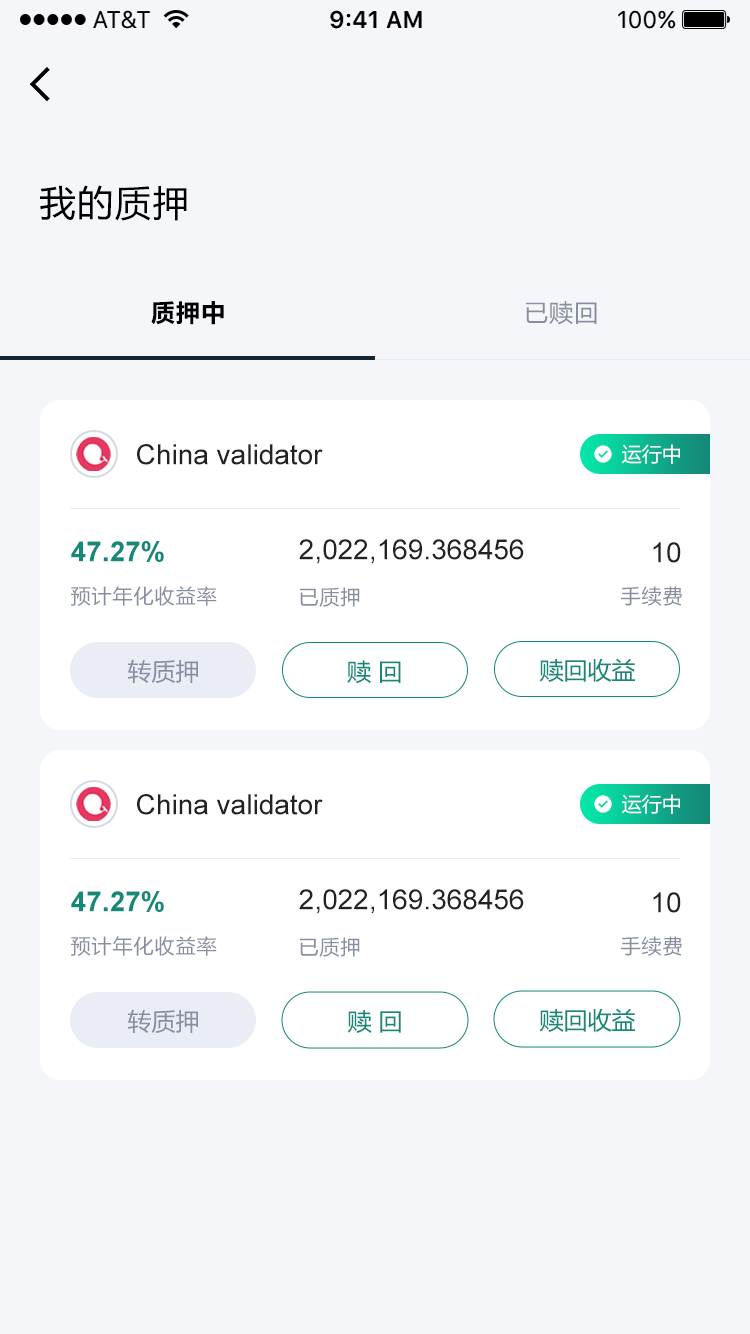
<style>
.page{position:relative;width:750px;height:1334px;background:#f5f6fa}
.page>*{position:absolute;margin:0}
.t1{font:36px "MicrosoftYaHei";letter-spacing:0.05em;color:#000000}
.t2{font:24px "MicrosoftYaHei-Bold";letter-spacing:0.05em;color:#000000}
.t3{font:24px "MicrosoftYaHei";letter-spacing:0.05em;color:#878e9f}
.t4{font:28px "ArialMT";color:#222222}
.t5{font:20px "MicrosoftYaHei";color:#ffffff}
.t6{font:28px "Arial-BoldMT";color:#158878}
.t7{font:20px "MicrosoftYaHei";letter-spacing:0.05em;color:#878e9f}
.t8{font:24px "MicrosoftYaHei";color:#878e9f}
.t9{font:24px "MicrosoftYaHei";color:#158878}
</style>
<div class="page">
<p class="t1" style="left:40px;top:185px;width:147px;height:36px">我的质押</p>
<p class="t2" style="left:151px;top:301px;width:73px;height:24px">质押中</p>
<p class="t3" style="left:526px;top:301px;width:71px;height:24px">已赎回</p>
<p class="t4" style="left:137px;top:444px;width:186px;height:21px">China validator</p>
<p class="t5" style="left:622px;top:444px;width:58px;height:20px">运行中</p>
<p class="t6" style="left:71px;top:541px;width:93px;height:21px">47.27%</p>
<p class="t4" style="left:299px;top:539px;width:225px;height:25px">2,022,169.368456</p>
<p class="t4" style="left:653px;top:542px;width:28px;height:21px">10</p>
<p class="t7" style="left:71px;top:586px;width:146px;height:20px">预计年化收益率</p>
<p class="t7" style="left:300px;top:587px;width:60px;height:20px">已质押</p>
<p class="t7" style="left:621px;top:586px;width:61px;height:20px">手续费</p>
<p class="t8" style="left:127px;top:659px;width:71px;height:24px">转质押</p>
<p class="t9" style="left:347px;top:660px;width:54px;height:24px">赎 回</p>
<p class="t9" style="left:539px;top:658px;width:96px;height:24px">赎回收益</p>
<p class="t4" style="left:137px;top:794px;width:186px;height:21px">China validator</p>
<p class="t5" style="left:622px;top:794px;width:58px;height:20px">运行中</p>
<p class="t6" style="left:71px;top:891px;width:93px;height:21px">47.27%</p>
<p class="t4" style="left:299px;top:889px;width:225px;height:25px">2,022,169.368456</p>
<p class="t4" style="left:653px;top:892px;width:28px;height:21px">10</p>
<p class="t7" style="left:71px;top:936px;width:146px;height:20px">预计年化收益率</p>
<p class="t7" style="left:300px;top:937px;width:60px;height:20px">已质押</p>
<p class="t7" style="left:621px;top:936px;width:61px;height:20px">手续费</p>
<p class="t8" style="left:127px;top:1009px;width:71px;height:24px">转质押</p>
<p class="t9" style="left:347px;top:1010px;width:54px;height:23px">赎 回</p>
<p class="t9" style="left:539px;top:1008px;width:96px;height:24px">赎回收益</p>
</div>
